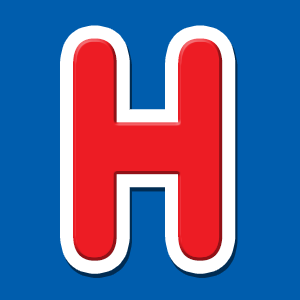
<style>
.page{position:relative;width:300px;height:300px;background:#005dad}
.page>*{position:absolute;margin:0}
.t1{font:275.6px "BPreplay-Bold";color:#ed1c24;font-weight:bold;scale:0.85 1}
</style>
<div class="page">
<p class="t1" style="left:73px;top:38px;width:150px;height:223px">H</p>
</div>
